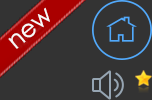
<style>
.page{position:relative;width:152px;height:100px;background:#333333}
.page>*{position:absolute;margin:0}
.t1{font:24px "STHeitiSC-Medium";color:#f9f8f8}
</style>
<div class="page">
<p class="t1" style="left:8px;top:7px;width:42px;height:42px;rotate:-40deg">new</p>
</div>
